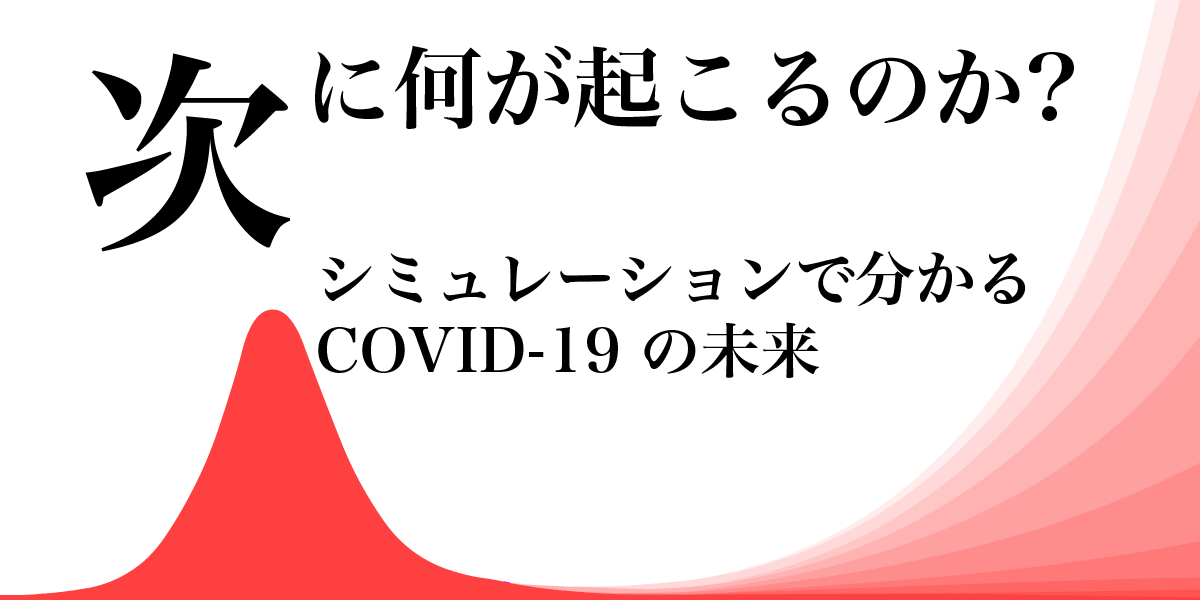
<style>
.page{position:relative;width:1200px;height:600px;background:#ffffff}
.page>*{position:absolute;margin:0}
.t1{font:220px "HiraMinPro-W6";color:#000000}
.t2{font:90px "HiraMinPro-W6";color:#000000}
.t3{font:60px "HiraMinPro-W6";color:#000000}
</style>
<div class="page">
<p class="t1" style="left:85px;top:53px;width:205px;height:199px">次</p>
<p class="t2" style="left:315px;top:45px;width:759px;height:84px">に何が起こるのか?</p>
<p class="t3" style="left:318px;top:250px;width:708px;height:128px">シミュレーションで分かる<br>COVID-19 の未来</p>
</div>
